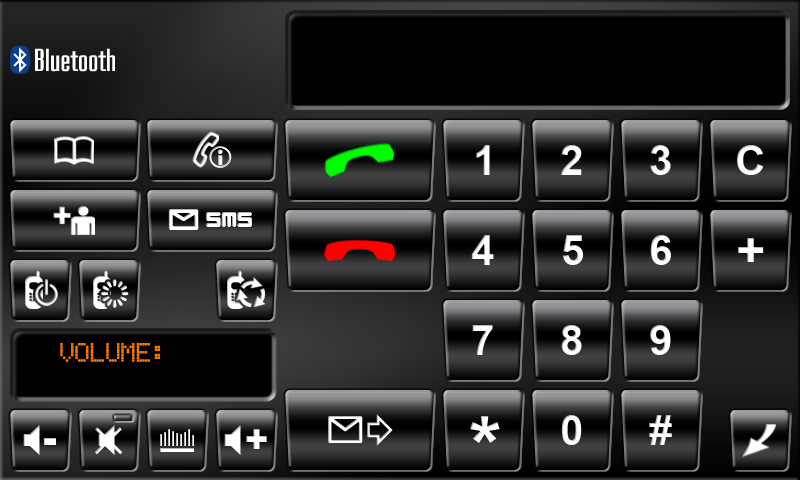
<style>
.page{position:relative;width:800px;height:480px}
.page>*{position:absolute;margin:0}
.t1{font:41.7px "Arial-BoldMT";color:#ffffff}
.t2{font:50px "Arial-BoldMT";color:#ffffff}
.t3{font:25px "EricssonGA628";color:#ff7800}
.t4{font:83.3px "Arial-BoldMT";color:#ffffff}
</style>
<div class="page">
<p class="t1" style="left:476px;top:145px;width:14px;height:30px">1</p>
<p class="t1" style="left:561px;top:145px;width:21px;height:30px">2</p>
<p class="t1" style="left:650px;top:145px;width:21px;height:30px">3</p>
<p class="t1" style="left:737px;top:145px;width:27px;height:30px">C</p>
<p class="t1" style="left:471px;top:235px;width:23px;height:30px">4</p>
<p class="t1" style="left:562px;top:235px;width:21px;height:30px">5</p>
<p class="t1" style="left:650px;top:235px;width:21px;height:30px">6</p>
<p class="t2" style="left:738px;top:238px;width:26px;height:24px">+</p>
<p class="t1" style="left:472px;top:325px;width:21px;height:30px">7</p>
<p class="t1" style="left:561px;top:325px;width:21px;height:30px">8</p>
<p class="t1" style="left:650px;top:325px;width:21px;height:30px">9</p>
<p class="t3" style="left:60px;top:343px;width:100px;height:19px">VOLUME:</p>
<p class="t4" style="left:470px;top:416px;width:30px;height:27px">*</p>
<p class="t1" style="left:561px;top:415px;width:21px;height:30px">0</p>
<p class="t1" style="left:649px;top:415px;width:23px;height:30px">#</p>
</div>
